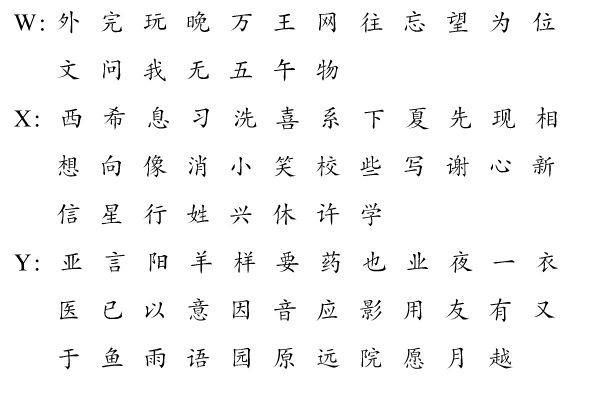
<style>
.page{position:relative;width:595px;height:417px;background:#ffffff}
.page>*{position:absolute;margin:0}
.t1{font:24px/48px "CTKaiTiSJ";letter-spacing:0.1em;color:#000000}
.t2{font:24px/48px "CTKaiTiSJ";letter-spacing:0.1em;color:#ffffff}
</style>
<div class="page">
<p class="t1" style="left:14px;top:11px;width:545px;height:359px">W: 外  完  玩  晚  万  王  网  往  忘  望  为  位  <br><span class="t2">W: </span>文  问  我  无  五  午  物<br>X:  西  希  息  习  洗  喜  系  下  夏  先  现  相  <br><span class="t2">W: </span>想  向  像  消  小  笑  校  些  写  谢  心  新  <br><span class="t2">W: </span>信  星  行  姓  兴  休  许  学<br>Y:  亚  言  阳  羊  样  要  药  也  业  夜  一  衣  <br><span class="t2">W: </span>医  已  以  意  因  音  应  影  用  友  有  又  <span class="t2">W: </span>于  鱼  雨  语  园  原  远  院  愿  月  越</p>
</div>
